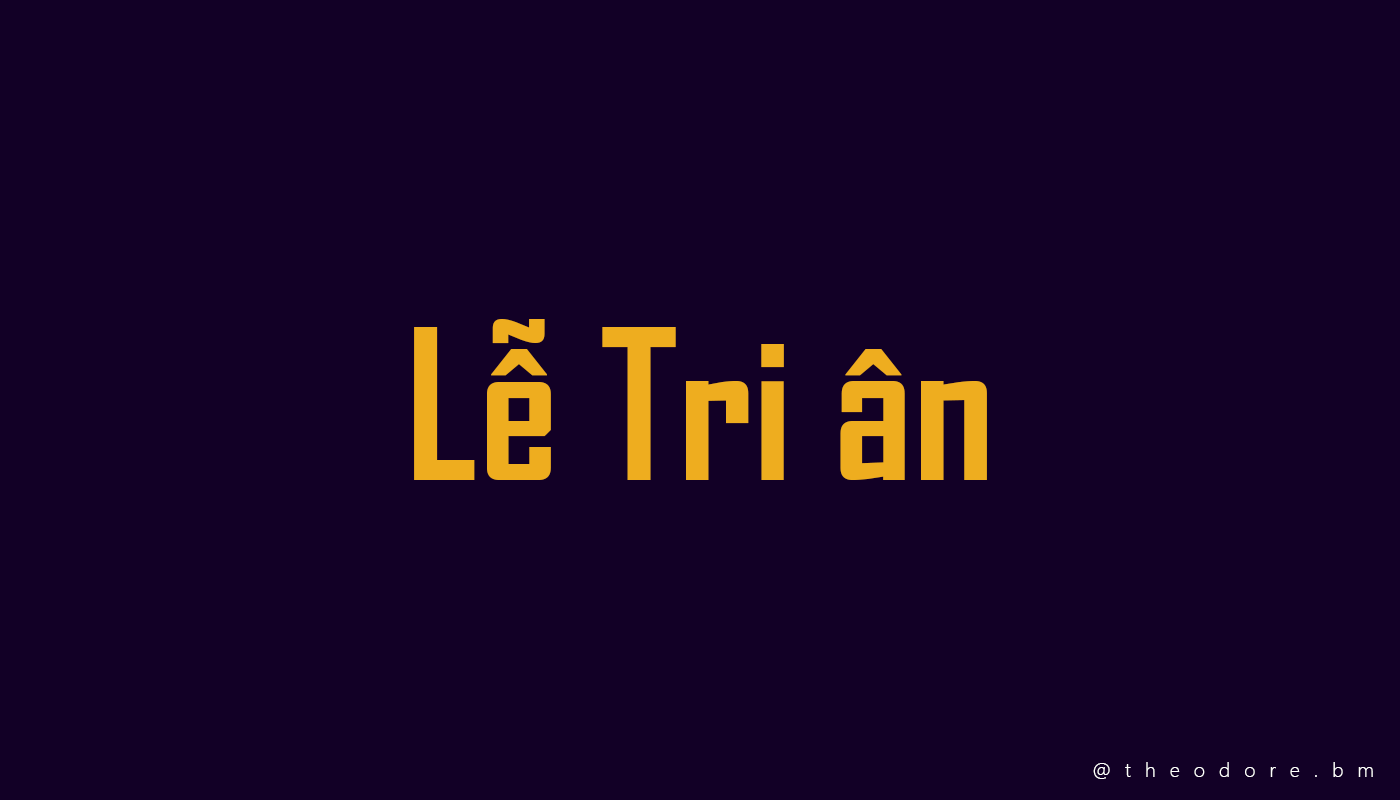
<style>
.page{position:relative;width:1400px;height:800px;background:#120026}
.page>*{position:absolute;margin:0}
.t1{font:200px "SVN-AgencyFBbold";color:#eead1f}
.t2{font:20px "SegoeUI-Light";letter-spacing:0.7em;color:#ffffff}
</style>
<div class="page">
<p class="t1" style="left:414px;top:319px;width:573px;height:161px">Lễ Tri ân</p>
<p class="t2" style="left:1093px;top:762px;width:280px;height:17px">@theodore.bm</p>
</div>
